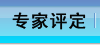
<style>
.page{position:relative;width:100px;height:45px}
.page>*{position:absolute;margin:0}
.t1{font:18px "SimHei";letter-spacing:0.04em;color:#040404;font-weight:bold}
</style>
<div class="page">
<p class="t1" style="left:12px;top:12px;width:74px;height:18px">专家评定</p>
</div>
